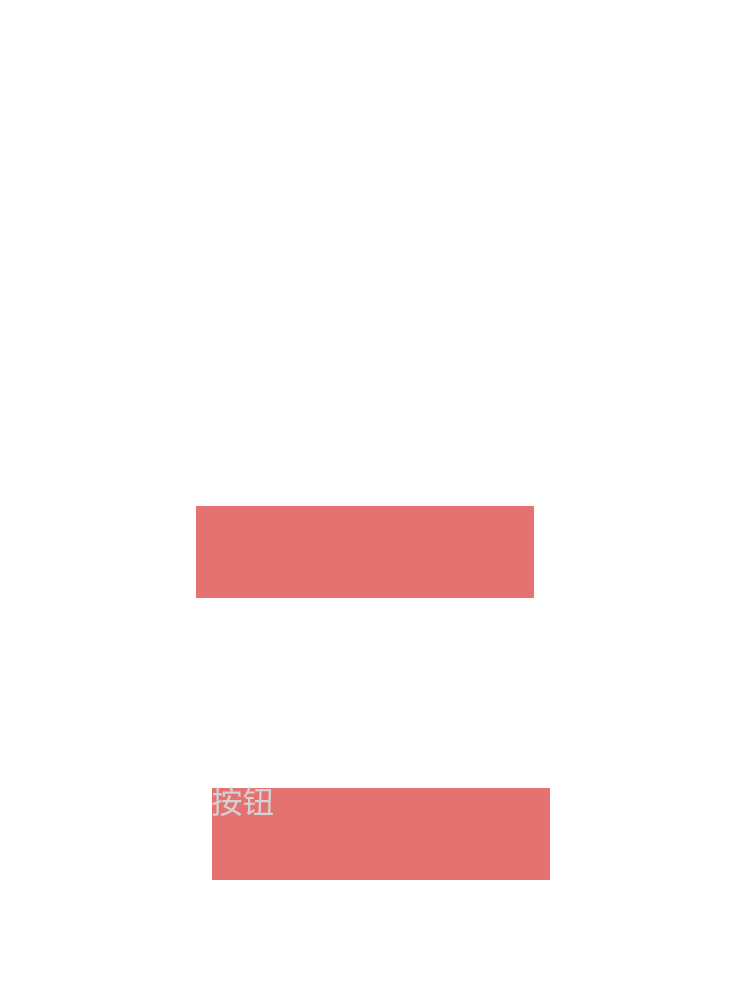
<style>
.page{position:relative;width:750px;height:1000px;background:#ffffff}
.page>*{position:absolute;margin:0}
.t1{font:30px "MicrosoftYaHei";letter-spacing:0.05em;color:#d3d1d2}
</style>
<div class="page">
<p class="t1" style="left:212px;top:787px;width:61px;height:29px">按钮</p>
</div>
